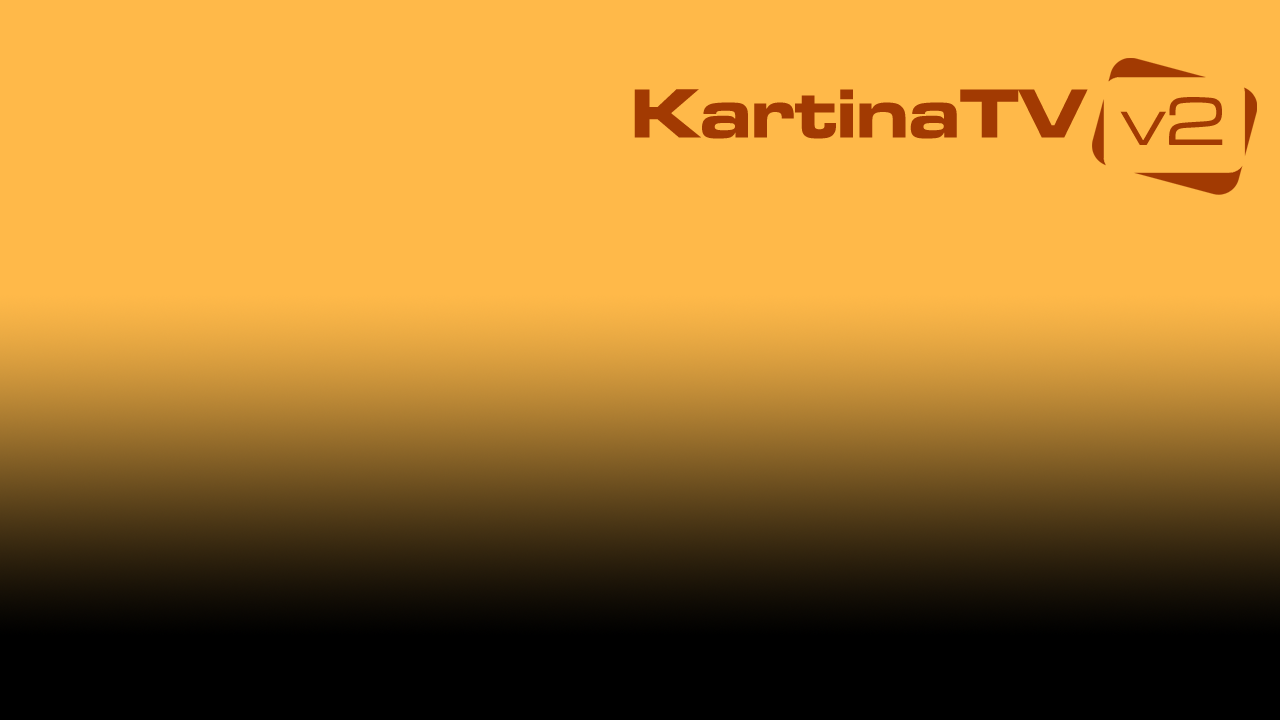
<style>
.page{position:relative;width:1280px;height:720px;background:#ffb949}
.page>*{position:absolute;margin:0}
.t1{font:72px "MicrogrammaD-BoldExte";letter-spacing:0.01em;color:#a23a02}
.t2{font:72px "MicrogrammaD-MediExte";letter-spacing:0.01em;color:#a23a02}
</style>
<div class="page">
<p class="t1" style="left:634px;top:89px;width:454px;height:50px">KartinaTV</p>
<p class="t2" style="left:1120px;top:97px;width:103px;height:48px">v2</p>
</div>
